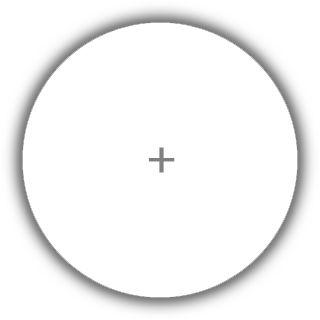
<style>
.page{position:relative;width:320px;height:320px;background:#ffffff}
.page>*{position:absolute;margin:0}
.t1{font:48px "Helvetica-Light";color:#808080;font-weight:bold}
</style>
<div class="page">
<p class="t1" style="left:148px;top:147px;width:27px;height:26px">+</p>
</div>
